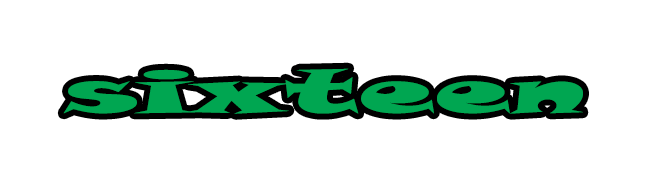
<style>
.page{position:relative;width:650px;height:191px;background:#ffffff}
.page>*{position:absolute;margin:0}
.t1{font:60px "SnapITC-Regular";color:#00a651;scale:2 1}
</style>
<div class="page">
<p class="t1" style="left:63px;top:68px;width:520px;height:46px">sixteen</p>
</div>
